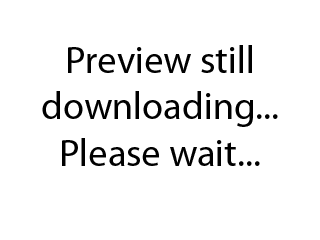
<style>
.page{position:relative;width:320px;height:240px;background:#ffffff}
.page>*{position:absolute;margin:0}
.t1{font:38.4px "MyriadPro-Regular";color:#000000}
</style>
<div class="page">
<p class="t1" style="left:42px;top:45px;width:236px;height:121px;text-align:center">Preview still <br>downloading...<br>Please wait...</p>
</div>
